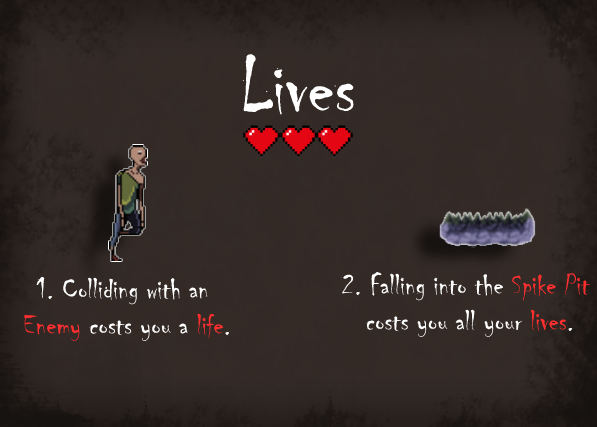
<style>
.page{position:relative;width:597px;height:427px;background:#342b27}
.page>*{position:absolute;margin:0}
.t1{font:80px "Chiller-Regular";color:#ffffff}
.t2{font:30px "Chiller-Regular";color:#ffffff}
.t3{font:30px "Chiller-Regular";color:#ff2f2f}
</style>
<div class="page">
<p class="t1" style="left:242px;top:54px;width:112px;height:61px">Lives</p>
<p class="t2" style="left:24px;top:276px;width:206px;height:65px;text-align:center">1. Colliding with an <br><span class="t3">Enemy </span>costs you a <span class="t3">life</span>.</p>
<p class="t2" style="left:341px;top:272px;width:250px;height:65px;text-align:center">2. Falling into the <span class="t3">Spike Pit <br></span>costs you all your <span class="t3">lives</span>.</p>
</div>
